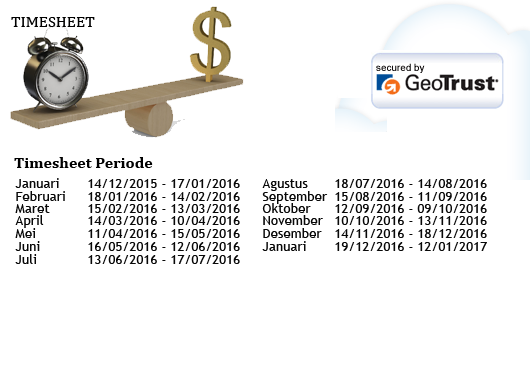
<style>
.page{position:relative;width:531px;height:371px;background:#ffffff}
.page>*{position:absolute;margin:0}
.t1{font:13.3px "TrebuchetMS";color:#080808}
</style>
<div class="page">
<p class="t1" style="left:15px;top:178px;width:225px;height:10px">Januari 14/12/2015 - 17/01/2016</p>
<p class="t1" style="left:262px;top:179px;width:225px;height:12px">Agustus 18/07/2016 - 14/08/2016</p>
<p class="t1" style="left:16px;top:191px;width:224px;height:10px">Februari 18/01/2016 - 14/02/2016</p>
<p class="t1" style="left:262px;top:191px;width:225px;height:13px">September 15/08/2016 - 11/09/2016</p>
<p class="t1" style="left:15px;top:204px;width:225px;height:9px">Maret  15/02/2016 - 13/03/2016</p>
<p class="t1" style="left:262px;top:203px;width:225px;height:10px">Oktober 12/09/2016 - 09/10/2016</p>
<p class="t1" style="left:15px;top:215px;width:225px;height:13px">April  14/03/2016 - 10/04/2016</p>
<p class="t1" style="left:263px;top:215px;width:224px;height:10px">November 10/10/2016 - 13/11/2016</p>
<p class="t1" style="left:15px;top:228px;width:225px;height:10px">Mei  11/04/2016 - 15/05/2016</p>
<p class="t1" style="left:263px;top:228px;width:224px;height:10px">Desember 14/11/2016 - 18/12/2016</p>
<p class="t1" style="left:15px;top:241px;width:225px;height:10px">Juni  16/05/2016 - 12/06/2016</p>
<p class="t1" style="left:262px;top:241px;width:225px;height:10px">Januari 19/12/2016 - 12/01/2017</p>
<p class="t1" style="left:15px;top:254px;width:225px;height:10px">Juli  13/06/2016 - 17/07/2016</p>
</div>
